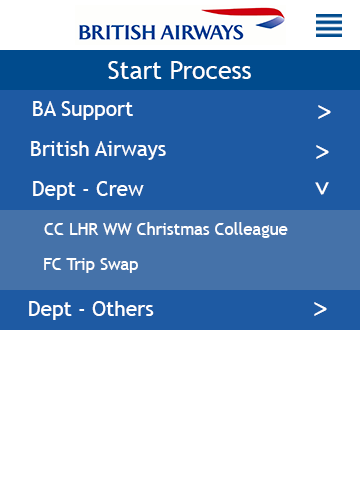
<style>
.page{position:relative;width:360px;height:480px;background:#ffffff}
.page>*{position:absolute;margin:0}
.t1{font:25px "TrebuchetMS";color:#ffffff}
.t2{font:20.8px "TrebuchetMS";color:#ffffff}
.t3{font:33.3px "TrebuchetMS";color:#ffffff}
.t4{font:16.7px "TrebuchetMS";color:#ffffff}
</style>
<div class="page">
<p class="t1" style="left:108px;top:61px;width:143px;height:18px">Start Process</p>
<p class="t2" style="left:33px;top:101px;width:100px;height:19px">BA Support</p>
<p class="t3" style="left:318px;top:105px;width:13px;height:14px">&gt;</p>
<p class="t2" style="left:31px;top:141px;width:135px;height:19px">British Airways</p>
<p class="t3" style="left:316px;top:145px;width:13px;height:14px">&gt;</p>
<p class="t2" style="left:33px;top:181px;width:111px;height:19px">Dept - Crew</p>
<p class="t3" style="left:315px;top:182px;width:14px;height:13px;rotate:89deg">&gt;</p>
<p class="t4" style="left:44px;top:222px;width:244px;height:16px">CC LHR WW Christmas Colleague</p>
<p class="t4" style="left:44px;top:258px;width:94px;height:15px">FC Trip Swap</p>
<p class="t2" style="left:29px;top:301px;width:125px;height:19px">Dept - Others</p>
<p class="t3" style="left:314px;top:302px;width:13px;height:14px">&gt;</p>
</div>
